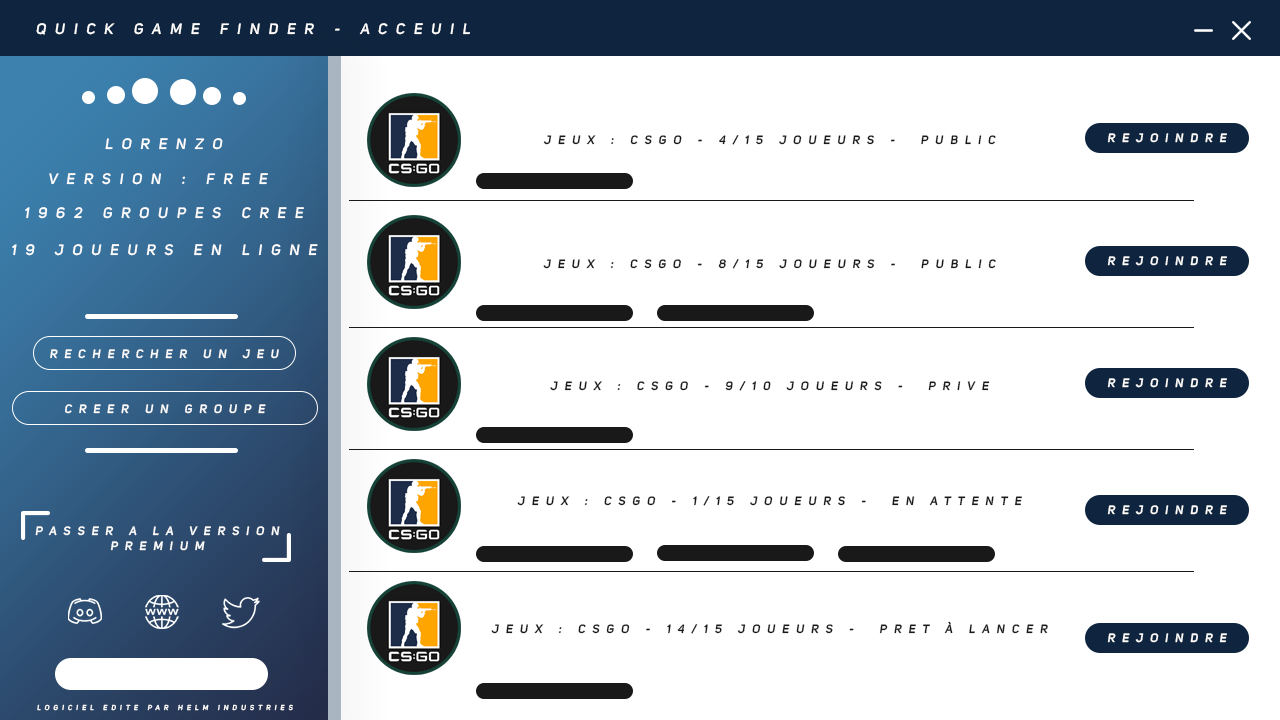
<style>
.page{position:relative;width:1280px;height:720px;background:#ffffff}
.page>*{position:absolute;margin:0}
.t1{font:15px "UniSansSemiBoldItalic";letter-spacing:0.585em;color:#ffffff;text-transform:uppercase}
.t2{font:12px "UniSansSemiBoldItalic";letter-spacing:0.585em;color:#191919;text-transform:uppercase}
.t3{font:12px "UniSansSemiBoldItalic";letter-spacing:0.585em;color:#ffffff;text-transform:uppercase}
.t4{font:7px "UniSansSemiBoldItalic";letter-spacing:0.585em;color:#ffffff;text-transform:uppercase}
</style>
<div class="page">
<p class="t1" style="left:36px;top:23px;width:434px;height:12px">quick game finder - acceuil</p>
<p class="t2" style="left:543px;top:135px;width:453px;height:10px">jeux : csgo - 4/15 joueurs -  public</p>
<p class="t1" style="left:105px;top:138px;width:118px;height:12px">lorenzo</p>
<p class="t1" style="left:49px;top:173px;width:219px;height:12px">version : free</p>
<p class="t1" style="left:25px;top:207px;width:279px;height:12px">1962 groupes cree</p>
<p class="t1" style="left:12px;top:244px;width:306px;height:12px">19 joueurs en ligne</p>
<p class="t2" style="left:543px;top:259px;width:453px;height:10px">jeux : csgo - 8/15 joueurs -  public</p>
<p class="t3" style="left:50px;top:349px;width:229px;height:10px">rechercher un jeu</p>
<p class="t2" style="left:550px;top:381px;width:440px;height:10px">jeux : csgo - 9/10 joueurs -  prive</p>
<p class="t3" style="left:65px;top:404px;width:201px;height:10px">creer un groupe</p>
<p class="t2" style="left:517px;top:496px;width:505px;height:10px">jeux : csgo - 1/15 joueurs -  en attente</p>
<p class="t3" style="left:35px;top:526px;width:245px;height:25px;text-align:center">passer a la version<br>premium</p>
<p class="t2" style="left:491px;top:621px;width:557px;height:13px">jeux : csgo - 14/15 joueurs -  pret à lancer</p>
<p class="t4" style="left:37px;top:704px;width:256px;height:7px">logiciel edite par helm industries</p>
</div>
